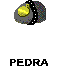
<style>
.page{position:relative;width:58px;height:66px;background:#ffffff}
.page>*{position:absolute;margin:0}
.t1{font:10.3px "Arial-BoldMT";color:#000000;scale:1.11 1}
</style>
<div class="page">
<p class="t1" style="left:9px;top:58px;width:40px;height:8px">PEDRA</p>
</div>
